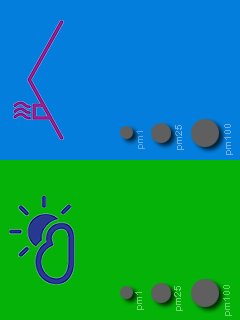
<style>
.page{position:relative;width:240px;height:320px;background:#037edc}
.page>*{position:absolute;margin:0}
.t1{font:10px "ArialRoundedMTBold";color:#71b0eb}
.t2{font:10px "ArialRoundedMTBold";color:#71b0ec}
.t3{font:10px "ArialRoundedMTBold";color:#5ea9ec}
.t4{font:10px "ArialRoundedMTBold";color:#6ad66c}
.t5{font:10px "ArialRoundedMTBold";color:#6bd76d}
.t6{font:10px "ArialRoundedMTBold";color:#61d764}
</style>
<div class="page">
<p class="t1" style="left:175px;top:125px;width:9px;height:25px;rotate:-90deg">pm25</p>
<p class="t2" style="left:224px;top:124px;width:9px;height:31px;rotate:-90deg">pm100</p>
<p class="t3" style="left:136px;top:131px;width:9px;height:18px;rotate:-90deg">pm1</p>
<p class="t4" style="left:135px;top:292px;width:9px;height:18px;rotate:-90deg">pm1</p>
<p class="t5" style="left:174px;top:286px;width:9px;height:25px;rotate:-90deg">pm25</p>
<p class="t6" style="left:223px;top:285px;width:9px;height:31px;rotate:-90deg">pm100</p>
</div>
